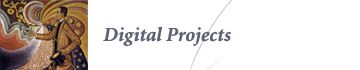
<style>
.page{position:relative;width:360px;height:70px;background:#ffffff}
.page>*{position:absolute;margin:0}
.t1{font:20px "MinionBoldItalic";color:#5f6275}
</style>
<div class="page">
<p class="t1" style="left:103px;top:26px;width:128px;height:20px">Digital Projects</p>
</div>
